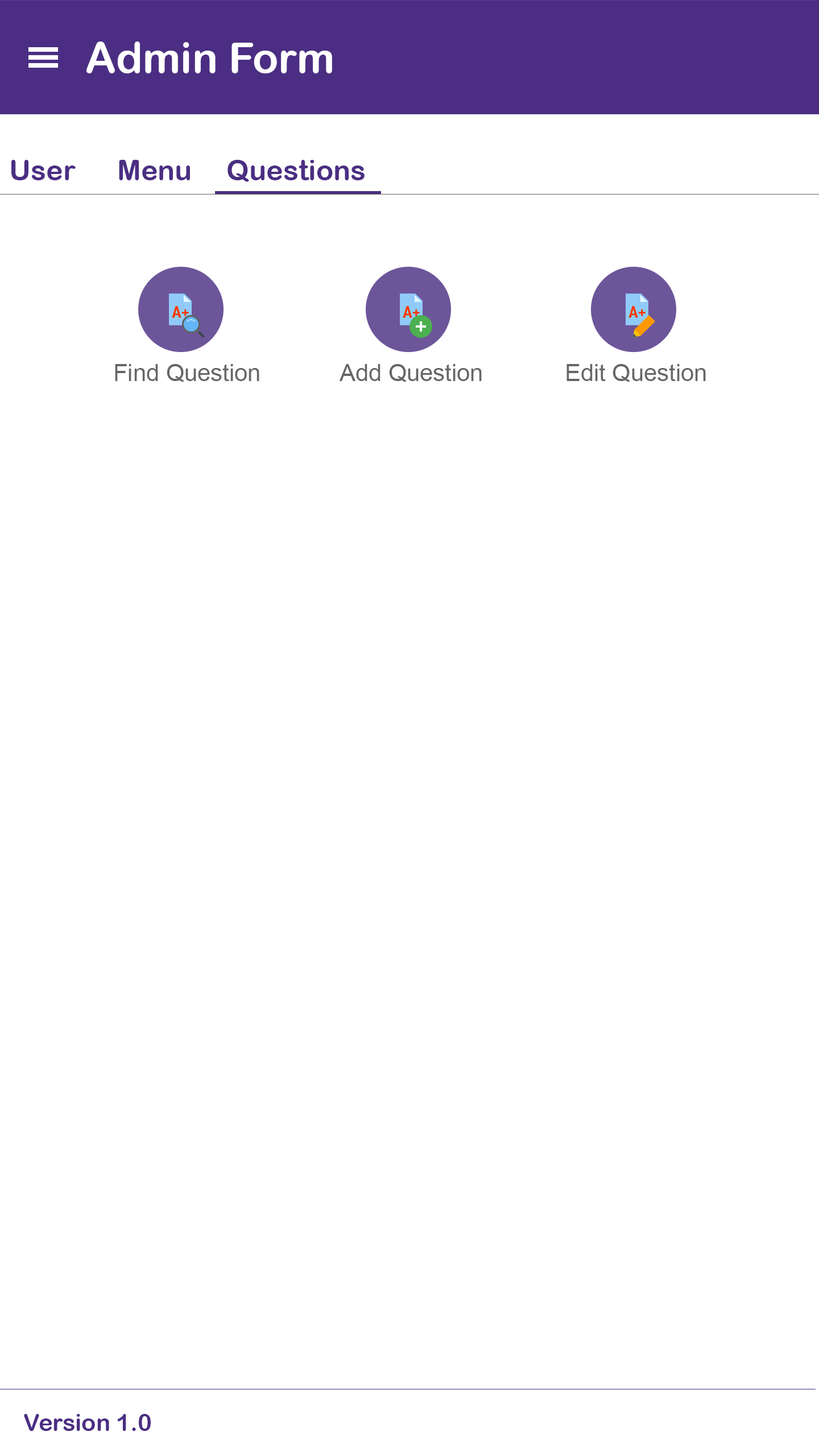
<style>
.page{position:relative;width:819px;height:1456px;background:#ffffff}
.page>*{position:absolute;margin:0}
.t1{font:42.7px "ArialRoundedMTBold";color:#ffffff}
.t2{font:28.4px "ArialRoundedMTBold";color:#4b2e83}
.t3{font:23.7px "ArialMT";color:#666666}
.t4{font:23.7px "ArialRoundedMTBold";color:#4b2e83}
</style>
<div class="page">
<p class="t1" style="left:86px;top:42px;width:246px;height:31px">Admin Form</p>
<p class="t2" style="left:11px;top:160px;width:65px;height:20px">User</p>
<p class="t2" style="left:119px;top:160px;width:71px;height:20px">Menu</p>
<p class="t2" style="left:227px;top:160px;width:138px;height:22px">Questions</p>
<p class="t3" style="left:115px;top:364px;width:144px;height:18px">Find Question</p>
<p class="t3" style="left:339px;top:364px;width:143px;height:18px">Add Question</p>
<p class="t3" style="left:566px;top:364px;width:140px;height:18px">Edit Question</p>
<p class="t4" style="left:24px;top:1414px;width:127px;height:17px">Version 1.0</p>
</div>
